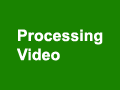
<style>
.page{position:relative;width:120px;height:90px;background:#198300}
.page>*{position:absolute;margin:0}
.t1{font:16px "Arial-BoldMT";color:#ffffff}
</style>
<div class="page">
<p class="t1" style="left:17px;top:29px;width:86px;height:32px">Processing<br>Video</p>
</div>
